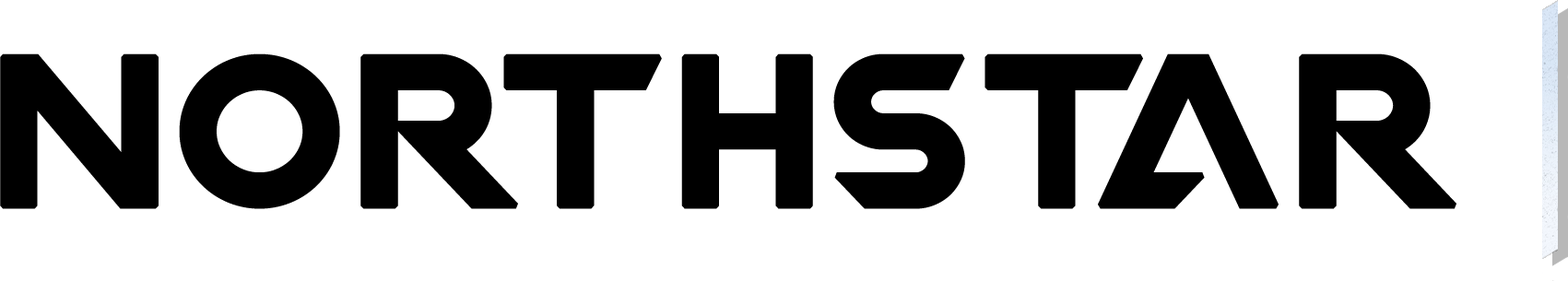
<style>
.page{position:relative;width:1568px;height:281px;background:#ffffff}
.page>*{position:absolute;margin:0}
.t1{font:206.4px "Titanfall-Regular";color:#000000;font-weight:bold;scale:1.04 1}
.t2{font:206.4px "Titanfall-Regular";letter-spacing:-0.16em;color:#000000;font-weight:bold;scale:1.04 1}
.t3{font:206.4px "Titanfall-Regular";letter-spacing:-0.3em;color:#000000;font-weight:bold;scale:1.04 1}
</style>
<div class="page">
<p class="t1" style="left:0px;top:53px;width:1456px;height:156px">No<span class="t2">r</span>ths<span class="t3">t</span>ar</p>
</div>
